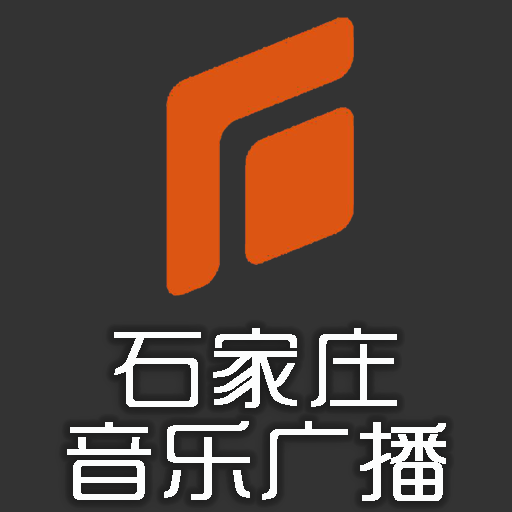
<style>
.page{position:relative;width:512px;height:512px;background:#333333}
.page>*{position:absolute;margin:0}
.t1{font:93.3px/93.3px "SJshishang-Regular";letter-spacing:0.02em;color:#fcfdfd;font-weight:bold}
</style>
<div class="page">
<p class="t1" style="left:67px;top:328px;width:379px;height:173px;text-align:center">石家庄<br>音乐广播</p>
</div>
